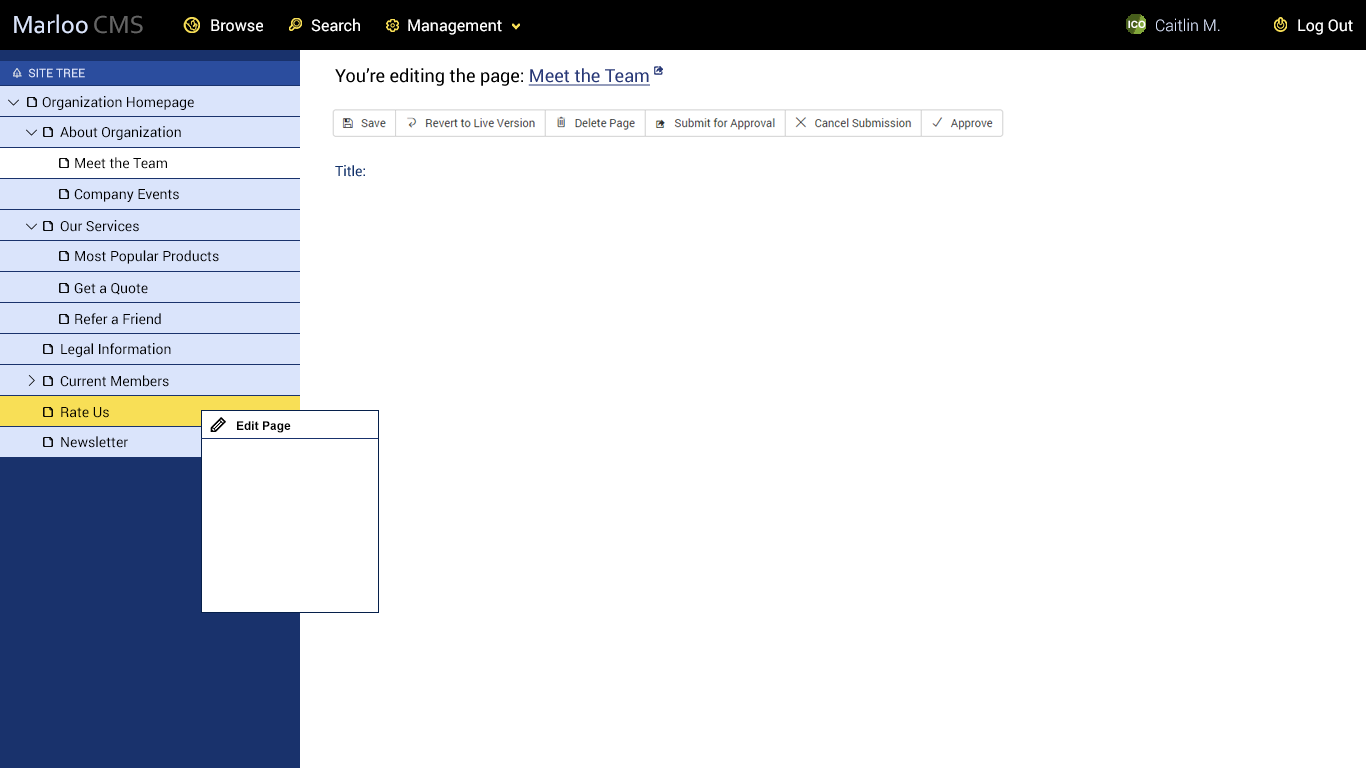
<style>
.page{position:relative;width:1366px;height:768px;background:#ffffff}
.page>*{position:absolute;margin:0}
.t1{font:26px "Corbel";color:#dae4fb}
.t2{font:26px "Corbel";color:#646464}
.t3{font:16px "Roboto-Regular";color:#ffffff}
.t4{font:10px "Arial-BoldMT";color:#ffffff}
.t5{font:16px "Roboto-Light";color:#dae4fb}
.t6{font:12px "Roboto-Regular";color:#dae4fb}
.t7{font:18px "Roboto-Regular";color:#000000}
.t8{font:18px "Roboto-Regular";color:#293977;text-decoration:underline}
.t9{font:14px "Roboto-Regular";color:#000000}
.t10{font:14px "Roboto-Regular";color:#12316a}
.t11{font:12px "Arial-BoldMT";color:#000000}
</style>
<div class="page">
<p class="t1" style="left:14px;top:14px;width:129px;height:20px">Marloo<span class="t2"> CMS</span></p>
<p class="t3" style="left:211px;top:19px;width:52px;height:13px">Browse</p>
<p class="t3" style="left:311px;top:18px;width:49px;height:14px">Search</p>
<p class="t3" style="left:408px;top:19px;width:94px;height:16px">Management</p>
<p class="t4" style="left:1128px;top:20px;width:18px;height:8px">ICO</p>
<p class="t5" style="left:1156px;top:18px;width:64px;height:14px">Caitlin M.</p>
<p class="t3" style="left:1298px;top:19px;width:55px;height:16px">Log Out</p>
<p class="t6" style="left:28px;top:68px;width:57px;height:10px">SITE TREE</p>
<p class="t7" style="left:335px;top:68px;width:315px;height:18px">You’re editing the page: <span class="t8">Meet the Team</span></p>
<p class="t9" style="left:42px;top:96px;width:152px;height:14px">Organization Homepage</p>
<p class="t9" style="left:60px;top:126px;width:121px;height:14px">About Organization</p>
<p class="t9" style="left:75px;top:157px;width:92px;height:12px">Meet the Team</p>
<p class="t10" style="left:335px;top:165px;width:30px;height:12px">Title:</p>
<p class="t9" style="left:74px;top:189px;width:105px;height:13px">Company Events</p>
<p class="t9" style="left:60px;top:220px;width:79px;height:12px">Our Services</p>
<p class="t9" style="left:75px;top:250px;width:144px;height:14px">Most Popular Products</p>
<p class="t9" style="left:74px;top:283px;width:74px;height:12px">Get a Quote</p>
<p class="t9" style="left:75px;top:313px;width:86px;height:12px">Refer a Friend</p>
<p class="t9" style="left:61px;top:343px;width:110px;height:14px">Legal Information</p>
<p class="t9" style="left:60px;top:375px;width:109px;height:12px">Current Members</p>
<p class="t9" style="left:61px;top:407px;width:48px;height:11px">Rate Us</p>
<p class="t11" style="left:237px;top:421px;width:54px;height:12px">Edit Page</p>
<p class="t9" style="left:61px;top:436px;width:67px;height:12px">Newsletter</p>
</div>
